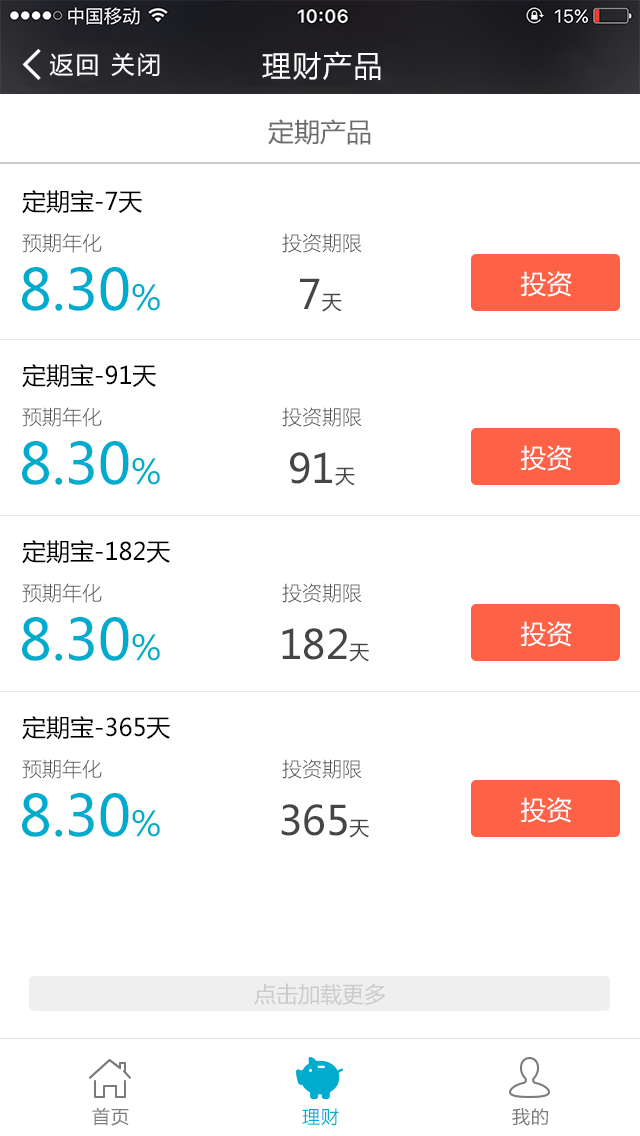
<style>
.page{position:relative;width:640px;height:1136px;background:#ffffff}
.page>*{position:absolute;margin:0}
.t1{font:24px "MicrosoftYaHei";letter-spacing:0.1em;color:#ffffff}
.t2{font:29.1px "MicrosoftYaHei";letter-spacing:0.06em;color:#ffffff}
.t3{font:26px "MicrosoftYaHei";color:#6c6c6c}
.t4{font:24px "MicrosoftYaHei";color:#000000}
.t5{font:20px "MicrosoftYaHeiLight";color:#555555}
.t6{font:56px "MicrosoftYaHei";color:#00accd}
.t7{font:34px "MicrosoftYaHei";color:#00accd}
.t8{font:40px "MicrosoftYaHei";color:#454545}
.t9{font:20px "MicrosoftYaHei";color:#454545}
.t10{font:25.6px "MicrosoftYaHei";color:#ffffff}
.t11{font:22px "MicrosoftYaHei";color:#cbcbcb}
.t12{font:18px "MicrosoftYaHei";letter-spacing:0.06em;color:#7b7b7b}
.t13{font:18px "MicrosoftYaHei";letter-spacing:0.06em;color:#00accd}
</style>
<div class="page">
<p class="t1" style="left:49px;top:53px;width:111px;height:23px">返回 关闭</p>
<p class="t2" style="left:262px;top:51px;width:119px;height:29px">理财产品</p>
<p class="t3" style="left:268px;top:119px;width:103px;height:26px">定期产品</p>
<p class="t4" style="left:22px;top:190px;width:120px;height:24px">定期宝-7天</p>
<p class="t5" style="left:22px;top:233px;width:80px;height:20px">预期年化</p>
<p class="t5" style="left:282px;top:233px;width:80px;height:20px">投资期限</p>
<p class="t6" style="left:22px;top:267px;width:138px;height:44px">8.30<span class="t7">%</span></p>
<p class="t8" style="left:300px;top:278px;width:42px;height:34px">7<span class="t9">天</span></p>
<p class="t10" style="left:521px;top:271px;width:51px;height:26px">投资</p>
<p class="t4" style="left:22px;top:364px;width:134px;height:24px">定期宝-91天</p>
<p class="t5" style="left:22px;top:407px;width:80px;height:20px">预期年化</p>
<p class="t5" style="left:282px;top:407px;width:80px;height:20px">投资期限</p>
<p class="t6" style="left:22px;top:441px;width:138px;height:44px">8.30<span class="t7">%</span></p>
<p class="t10" style="left:521px;top:445px;width:51px;height:26px">投资</p>
<p class="t8" style="left:290px;top:452px;width:65px;height:34px">91<span class="t9">天</span></p>
<p class="t4" style="left:22px;top:540px;width:148px;height:24px">定期宝-182天</p>
<p class="t5" style="left:22px;top:583px;width:80px;height:20px">预期年化</p>
<p class="t5" style="left:282px;top:583px;width:80px;height:20px">投资期限</p>
<p class="t6" style="left:22px;top:617px;width:138px;height:44px">8.30<span class="t7">%</span></p>
<p class="t8" style="left:282px;top:628px;width:87px;height:34px">182<span class="t9">天</span></p>
<p class="t10" style="left:521px;top:621px;width:51px;height:26px">投资</p>
<p class="t4" style="left:22px;top:716px;width:148px;height:24px">定期宝-365天</p>
<p class="t5" style="left:22px;top:759px;width:80px;height:20px">预期年化</p>
<p class="t5" style="left:282px;top:759px;width:80px;height:20px">投资期限</p>
<p class="t6" style="left:22px;top:793px;width:138px;height:44px">8.30<span class="t7">%</span></p>
<p class="t10" style="left:521px;top:797px;width:51px;height:26px">投资</p>
<p class="t8" style="left:281px;top:804px;width:88px;height:34px">365<span class="t9">天</span></p>
<p class="t11" style="left:254px;top:983px;width:131px;height:22px">点击加载更多</p>
<p class="t12" style="left:92px;top:1107px;width:37px;height:19px">首页</p>
<p class="t13" style="left:302px;top:1108px;width:37px;height:18px">理财</p>
<p class="t12" style="left:512px;top:1108px;width:36px;height:18px">我的</p>
</div>
